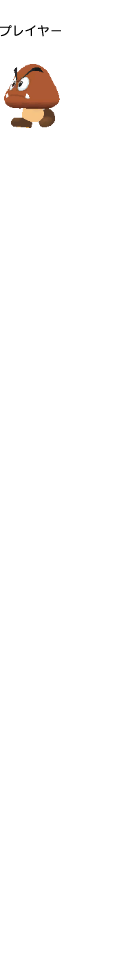
<style>
.page{position:relative;width:128px;height:960px;background:#ffffff}
.page>*{position:absolute;margin:0}
.t1{font:12px "nintendoPSeurat-M002";letter-spacing:0.06em;color:#000000}
</style>
<div class="page">
<p class="t1" style="left:0px;top:25px;width:61px;height:12px">プレイヤー</p>
</div>
